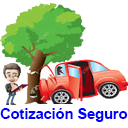
<style>
.page{position:relative;width:128px;height:128px;background:#ffffff}
.page>*{position:absolute;margin:0}
.t1{font:14.5px "Arial-BoldMT";color:#0000ff}
</style>
<div class="page">
<p class="t1" style="left:0px;top:108px;width:128px;height:14px">Cotización Seguro</p>
</div>
